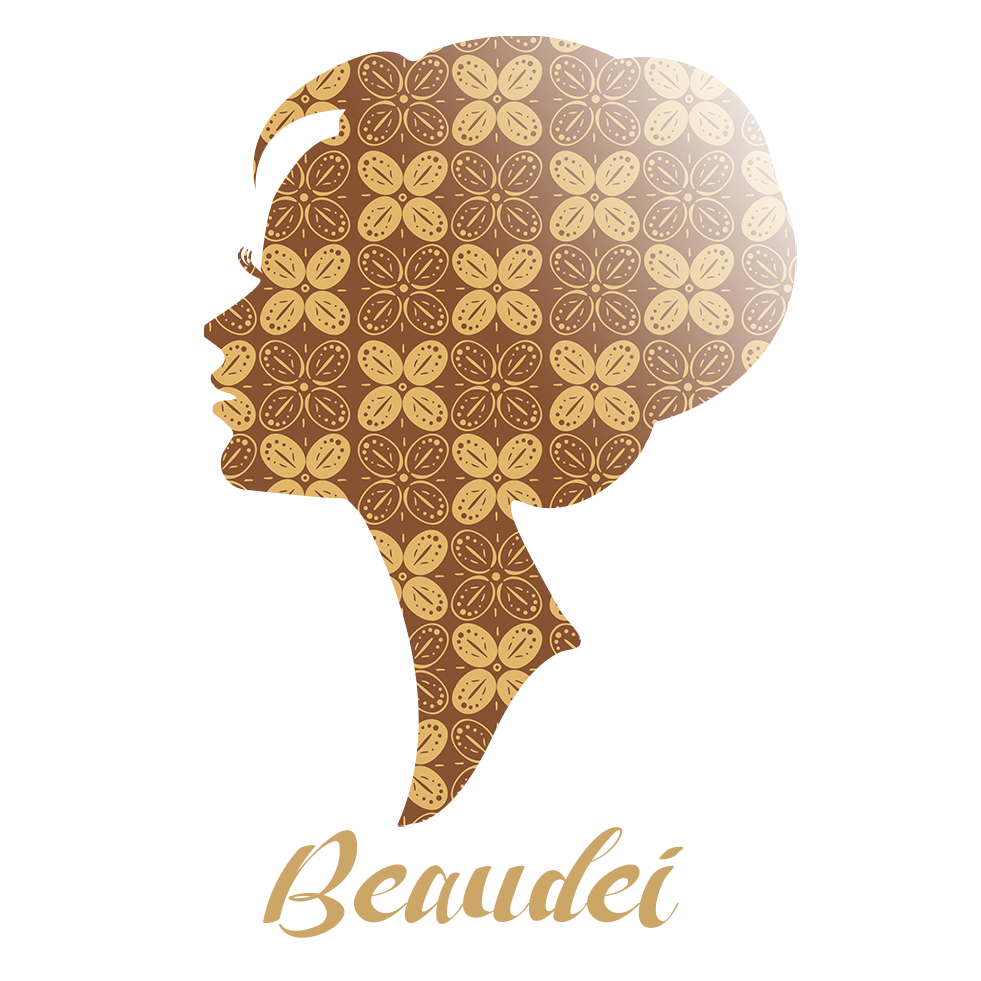
<style>
.page{position:relative;width:981px;height:981px;background:#ffffff}
.page>*{position:absolute;margin:0}
.t1{font:125px "FreesiaFlower";letter-spacing:0.01em;color:#cca666}
</style>
<div class="page">
<p class="t1" style="left:263px;top:827px;width:421px;height:111px">Beaudei</p>
</div>
